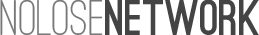
<style>
.page{position:relative;width:259px;height:35px;background:#ffffff}
.page>*{position:absolute;margin:0}
.t1{font:48px "OstrichSans-Black";color:#444444}
.t2{font:52px "OstrichSansRounded-Medium";color:#777777}
</style>
<div class="page">
<p class="t1" style="left:0px;top:0px;width:259px;height:36px"><span class="t2">NOLOSE</span>NETWORK</p>
</div>
